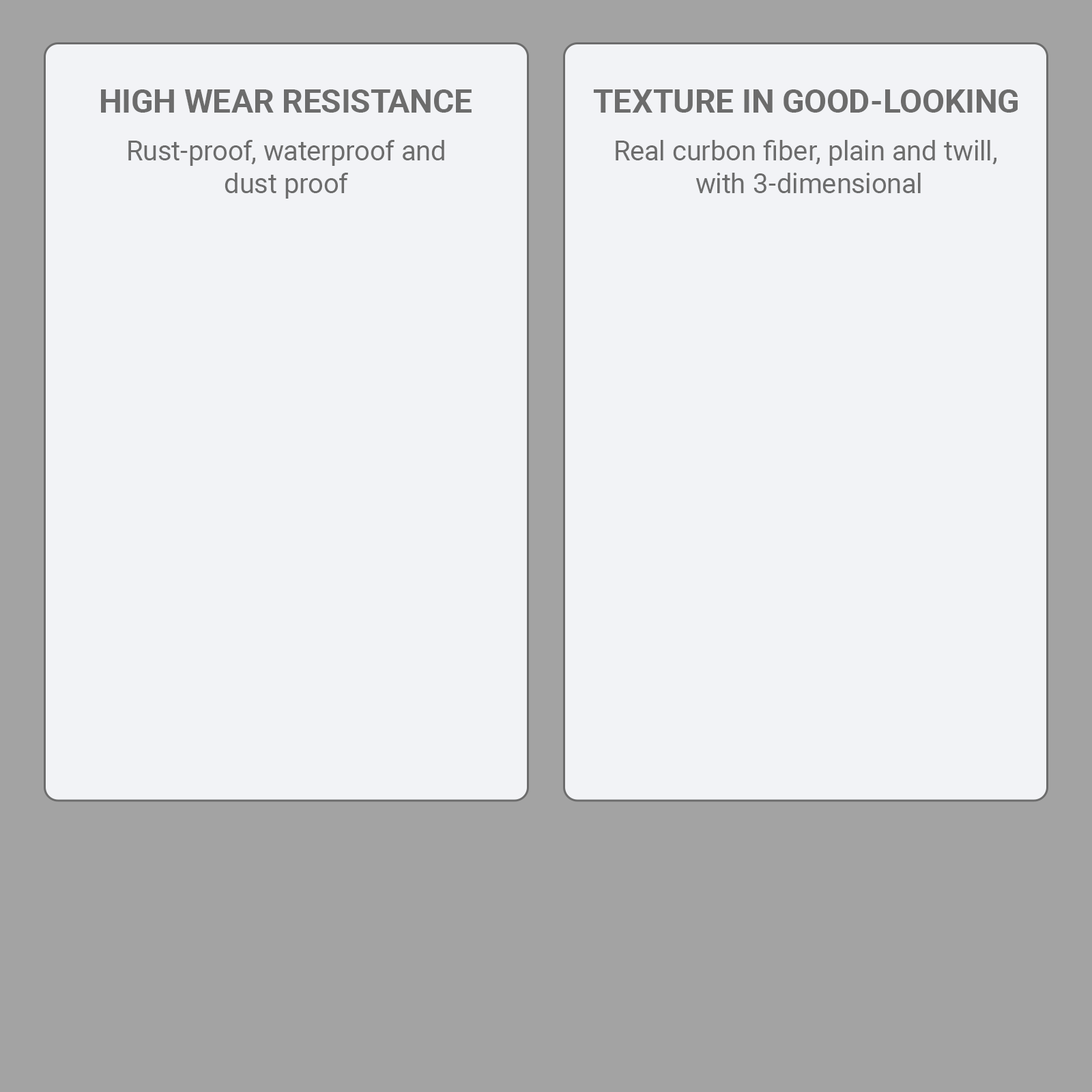
<style>
.page{position:relative;width:1092px;height:1092px;background:#f2f3f6}
.page>*{position:absolute;margin:0}
.t1{font:32.4px "Roboto-Bold";color:#6c6c6c}
.t2{font:27.4px "Roboto-Regular";color:#6c6c6c}
</style>
<div class="page">
<p class="t1" style="left:101px;top:89px;width:371px;height:24px">HIGH WEAR RESISTANCE</p>
<p class="t1" style="left:593px;top:89px;width:425px;height:24px">TEXTURE IN GOOD-LOOKING</p>
<p class="t2" style="left:128px;top:140px;width:316px;height:59px;text-align:center">Rust-proof, waterproof and<br>dust proof</p>
<p class="t2" style="left:616px;top:140px;width:380px;height:53px;text-align:center">Real curbon fiber, plain and twill, <br>with 3-dimensional</p>
</div>
